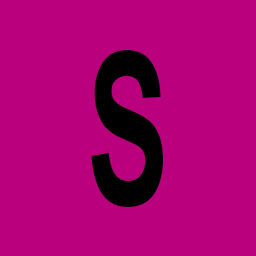
<style>
.page{position:relative;width:256px;height:256px;background:#ba007c}
.page>*{position:absolute;margin:0}
.t1{font:210.2px "Arial-BoldMT";color:#000000;scale:0.58 1}
</style>
<div class="page">
<p class="t1" style="left:91px;top:50px;width:73px;height:157px">S</p>
</div>
